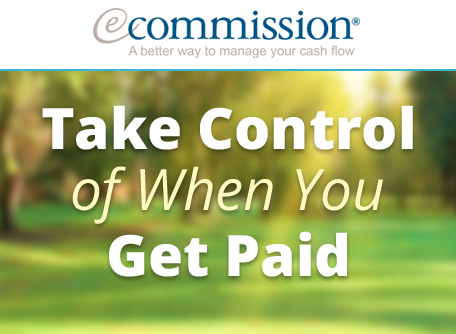
<style>
.page{position:relative;width:456px;height:334px;background:#ffffff}
.page>*{position:absolute;margin:0}
.t1{font:56.9px "OpenSans-Extrabold";color:#ffffff}
.t2{font:56.9px "OpenSans-Italic";color:#fef8c1}
</style>
<div class="page">
<p class="t1" style="left:42px;top:105px;width:371px;height:45px">Take Control</p>
<p class="t2" style="left:72px;top:166px;width:311px;height:58px">of When You</p>
<p class="t1" style="left:109px;top:231px;width:238px;height:46px">Get Paid</p>
</div>
